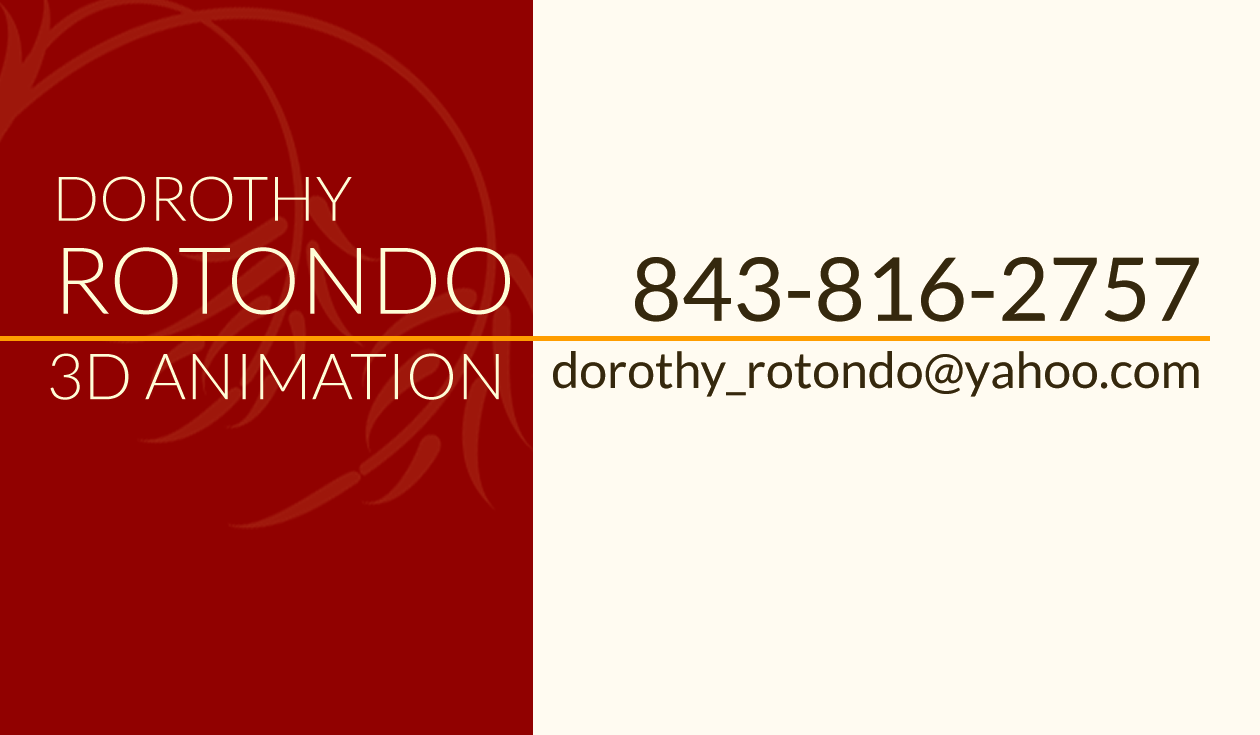
<style>
.page{position:relative;width:1260px;height:735px;background:#fffbf1}
.page>*{position:absolute;margin:0}
.t1{font:62px/92.9px "Lato-Light";color:#fefdd7;text-transform:uppercase}
.t2{font:92.9px/92.9px "Lato-Light";color:#fefdd7;text-transform:uppercase}
.t3{font:88px "Lato-Regular";color:#35280e;text-transform:uppercase}
.t4{font:64.1px "Lato-Light";color:#fefdd7;text-transform:uppercase}
.t5{font:49.9px "Lato-Regular";color:#35280e}
</style>
<div class="page">
<p class="t1" style="left:58px;top:176px;width:452px;height:139px">Dorothy<br><span class="t2">Rotondo</span></p>
<p class="t3" style="left:635px;top:257px;width:564px;height:65px">843-816-2757</p>
<p class="t4" style="left:50px;top:353px;width:449px;height:47px">3D Animation</p>
<p class="t5" style="left:553px;top:351px;width:646px;height:46px">dorothy_rotondo@yahoo.com</p>
</div>
